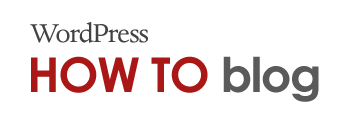
<style>
.page{position:relative;width:350px;height:120px;background:#ffffff}
.page>*{position:absolute;margin:0}
.t1{font:30px "DanteMT-Regular";letter-spacing:-0.03em;color:#424242}
.t2{font:48px "CenturyGothic-Bold";letter-spacing:-0.03em;color:#aa1717}
.t3{font:48px "CenturyGothic-Bold";letter-spacing:-0.03em;color:#5a5a5a}
</style>
<div class="page">
<p class="t1" style="left:30px;top:22px;width:118px;height:21px">WordPress</p>
<p class="t2" style="left:31px;top:56px;width:288px;height:46px">HOW TO <span class="t3">blog</span></p>
</div>
